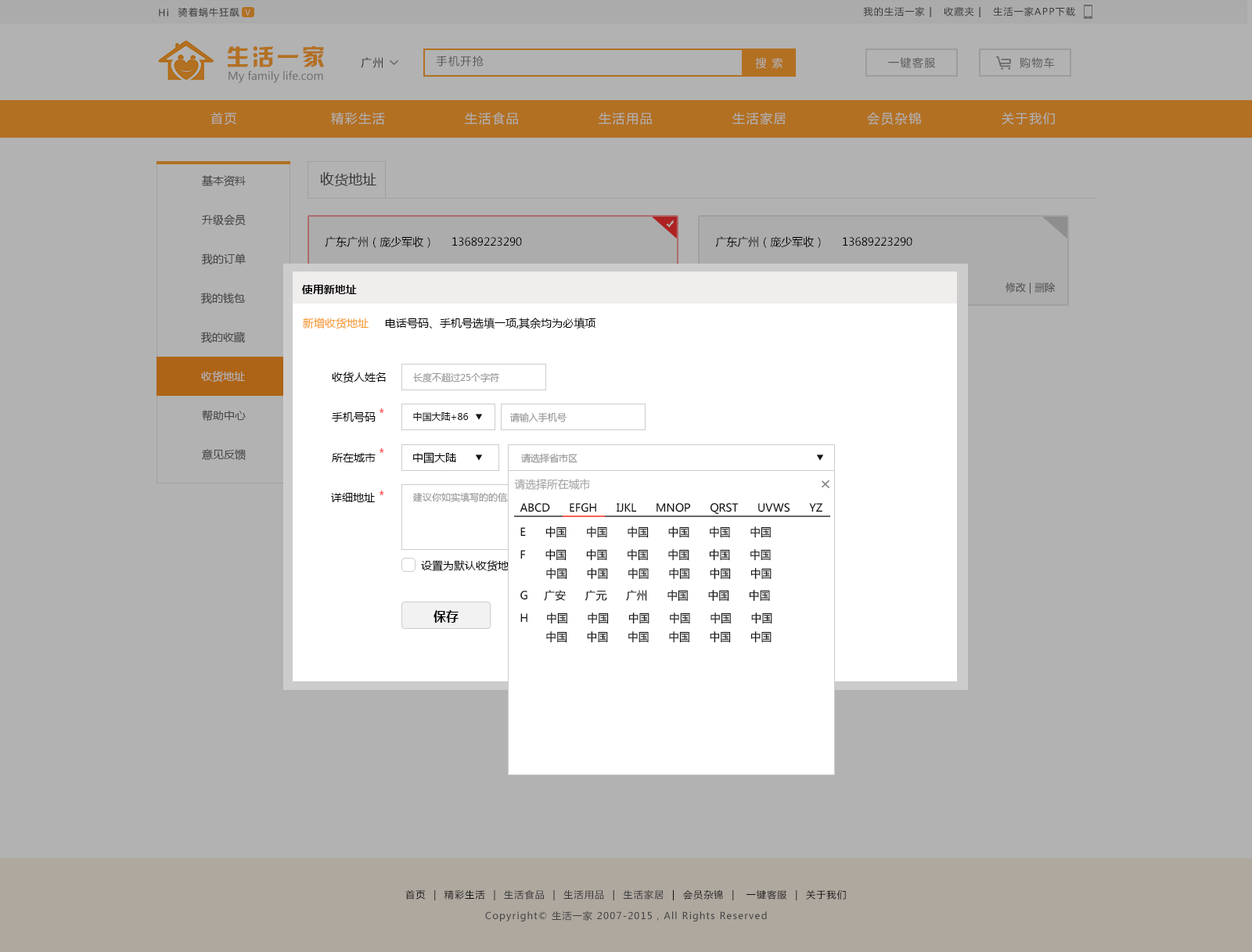
<style>
.page{position:relative;width:1252px;height:952px;background:#b2b2b2}
.page>*{position:absolute;margin:0}
.t1{font:9.4px "MicrosoftYaHei";letter-spacing:0.1em;color:#4d4d4d}
.t2{font:7.8px "MicrosoftYaHei";letter-spacing:0.1em;color:#b2b2b2}
.t3{font:22.7px "HYk2gj";letter-spacing:0.1em;color:#b27022}
.t4{font:11px "MicrosoftYaHei";letter-spacing:0.1em;color:#4d4d4d}
.t5{font:11px "MicrosoftYaHei";letter-spacing:0.1em;color:#595959}
.t6{font:11px "MicrosoftYaHei";letter-spacing:0.1em;color:#b2b2b2}
.t7{font:11px "MicrosoftYaHei";color:#6b6b6b}
.t8{font:12.5px "MicrosoftYaHei";letter-spacing:0.1em;color:#b2b2b2}
.t9{font:12.9px "MicrosoftYaHei";letter-spacing:0.1em;color:#b2b2b2}
.t10{font:14.1px "MicrosoftYaHei";color:#4d4d4d}
.t11{font:11px "MicrosoftYaHei";color:#474747}
.t12{font:11px "MicrosoftYaHei";color:#000000}
.t13{font:11px "MicrosoftYaHei-Bold";color:#000000}
.t14{font:10.2px "MicrosoftYaHei";color:#474747}
.t15{font:11px "MicrosoftYaHei";color:#f79c31}
.t16{font:11px "MicrosoftYaHei";color:#b2b2b2}
.t17{font:9.4px "MicrosoftYaHei";color:#999999}
.t18{font:11px "MicrosoftYaHei";color:#ff0202}
.t19{font:9.4px "MicrosoftYaHei";color:#1a1a1a}
.t20{font:11px "MicrosoftYaHei";color:#a6a6a6}
.t21{font:9.4px "MicrosoftYaHei"}
.t22{font:11px "MicrosoftYaHei";color:#141414}
.t23{font:11px/18.8px "MicrosoftYaHei";color:#141414}
.t24{font:12.5px "MicrosoftYaHei-Bold";color:#000000}
.t25{font:9.4px "MicrosoftYaHei";letter-spacing:0.1em;color:#1a1a1a}
.t26{font:9.4px "MicrosoftYaHei";letter-spacing:0.1em;color:#424242}
</style>
<div class="page">
<p class="t1" style="left:159px;top:9px;width:9px;height:7px">Hi</p>
<p class="t1" style="left:178px;top:7px;width:61px;height:10px">骑着蜗牛狂飙</p>
<p class="t2" style="left:245px;top:9px;width:5px;height:7px">V</p>
<p class="t1" style="left:863px;top:7px;width:212px;height:10px">我的生活一家 |   收藏夹 |   生活一家APP下载</p>
<p class="t3" style="left:227px;top:46px;width:97px;height:22px">生活一家</p>
<p class="t4" style="left:361px;top:57px;width:22px;height:11px">广州</p>
<p class="t5" style="left:436px;top:56px;width:48px;height:11px">手机开抢</p>
<p class="t6" style="left:755px;top:57px;width:28px;height:12px">搜 索</p>
<p class="t5" style="left:888px;top:57px;width:48px;height:11px">一键客服</p>
<p class="t5" style="left:1020px;top:57px;width:35px;height:11px">购物车</p>
<p class="t7" style="left:229px;top:70px;width:94px;height:13px">My family life.com</p>
<p class="t8" style="left:211px;top:112px;width:25px;height:13px">首页</p>
<p class="t8" style="left:331px;top:112px;width:54px;height:13px">精彩生活</p>
<p class="t8" style="left:465px;top:112px;width:53px;height:13px">生活食品</p>
<p class="t8" style="left:599px;top:112px;width:53px;height:13px">生活用品</p>
<p class="t8" style="left:732px;top:112px;width:54px;height:13px">生活家居</p>
<p class="t9" style="left:867px;top:112px;width:54px;height:13px">会员杂锦</p>
<p class="t8" style="left:1002px;top:112px;width:53px;height:13px">关于我们</p>
<p class="t10" style="left:320px;top:172px;width:56px;height:14px">收货地址</p>
<p class="t11" style="left:202px;top:175px;width:44px;height:11px">基本资料</p>
<p class="t11" style="left:202px;top:214px;width:44px;height:12px">升级会员</p>
<p class="t12" style="left:325px;top:236px;width:105px;height:12px">广东广州（庞少军收）</p>
<p class="t12" style="left:452px;top:237px;width:70px;height:10px">13689223290</p>
<p class="t12" style="left:715px;top:236px;width:106px;height:12px">广东广州（庞少军收）</p>
<p class="t12" style="left:843px;top:237px;width:69px;height:10px">13689223290</p>
<p class="t11" style="left:201px;top:254px;width:45px;height:11px">我的订单</p>
<p class="t11" style="left:200px;top:293px;width:45px;height:11px">我的钱包</p>
<p class="t13" style="left:302px;top:285px;width:55px;height:9px">使用新地址</p>
<p class="t14" style="left:1006px;top:283px;width:50px;height:11px">修改 | 删除</p>
<p class="t15" style="left:303px;top:318px;width:66px;height:11px">新增收货地址</p>
<p class="t12" style="left:385px;top:318px;width:211px;height:11px">电话号码、手机号选填一项,其余均为必填项</p>
<p class="t11" style="left:200px;top:332px;width:45px;height:12px">我的收藏</p>
<p class="t16" style="left:201px;top:371px;width:44px;height:12px">收货地址</p>
<p class="t12" style="left:332px;top:372px;width:54px;height:11px">收货人姓名</p>
<p class="t17" style="left:413px;top:372px;width:86px;height:11px">长度不超过25个字符</p>
<p class="t11" style="left:202px;top:410px;width:44px;height:12px">帮助中心</p>
<p class="t12" style="left:332px;top:412px;width:44px;height:11px">手机号码</p>
<p class="t18" style="left:380px;top:408px;width:4px;height:5px">*</p>
<p class="t19" style="left:413px;top:412px;width:56px;height:10px">中国大陆+86</p>
<p class="t17" style="left:509px;top:412px;width:58px;height:11px">请输入手机号</p>
<p class="t11" style="left:202px;top:449px;width:44px;height:11px">意见反馈</p>
<p class="t18" style="left:380px;top:448px;width:4px;height:5px">*</p>
<p class="t12" style="left:332px;top:453px;width:44px;height:9px">所在城市</p>
<p class="t12" style="left:413px;top:452px;width:43px;height:12px">中国大陆</p>
<p class="t17" style="left:521px;top:453px;width:57px;height:10px">请选择省市区</p>
<p class="t20" style="left:514px;top:479px;width:76px;height:11px">请选择所在城市</p>
<p class="t12" style="left:331px;top:493px;width:44px;height:9px">详细地址</p>
<p class="t18" style="left:380px;top:491px;width:4px;height:4px">*</p>
<p class="t21" style="left:413px;top:492px;width:175px;height:10px">建议你如实填写的的信息，如街道门牌号...</p>
<p class="t22" style="left:520px;top:503px;width:303px;height:12px">ABCD      EFGH      IJKL      MNOP      QRST      UVWS      YZ</p>
<p class="t22" style="left:520px;top:527px;width:251px;height:11px">E      中国      中国      中国      中国      中国      中国</p>
<p class="t23" style="left:520px;top:549px;width:252px;height:31px">F      中国      中国      中国      中国      中国      中国<br>        中国      中国      中国      中国      中国      中国</p>
<p class="t12" style="left:421px;top:560px;width:99px;height:12px">设置为默认收货地址</p>
<p class="t22" style="left:520px;top:590px;width:250px;height:12px">G     广安      广元      广州      中国      中国      中国</p>
<p class="t24" style="left:434px;top:610px;width:25px;height:13px">保存</p>
<p class="t23" style="left:520px;top:613px;width:252px;height:30px">H      中国      中国      中国      中国      中国      中国<br>        中国      中国      中国      中国      中国      中国</p>
<p class="t25" style="left:405px;top:890px;width:441px;height:11px">首页  |  精彩生活  |  <span class="t1">生活食品</span>  |  <span class="t1">生活用品</span>  |  <span class="t1">生活家居</span>  |  会员杂锦  |   一键客服  |  关于我们</p>
<p class="t26" style="left:485px;top:911px;width:282px;height:11px">Copyright© 生活一家 2007-2015，All Rights Reserved</p>
</div>
